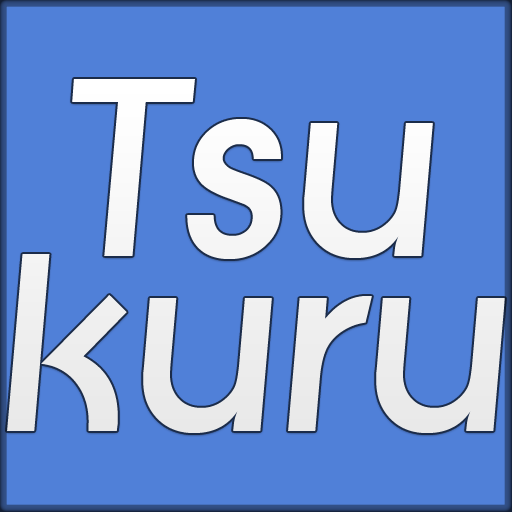
<style>
.page{position:relative;width:512px;height:512px;background:#5080d8}
.page>*{position:absolute;margin:0}
.t1{font:245.4px/174.7px "LiteraSerialHeavyItalic";color:#ffffff}
</style>
<div class="page">
<p class="t1" style="left:7px;top:79px;width:498px;height:354px;text-align:center">Tsu<br>kuru</p>
</div>
